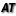
<style>
.page{position:relative;width:16px;height:16px;background:#ffffff}
.page>*{position:absolute;margin:0}
.t1{font:12.5px "MyriadPro-SemiboldIt";color:#000000}
</style>
<div class="page">
<p class="t1" style="left:1px;top:3px;width:15px;height:9px">AT</p>
</div>
